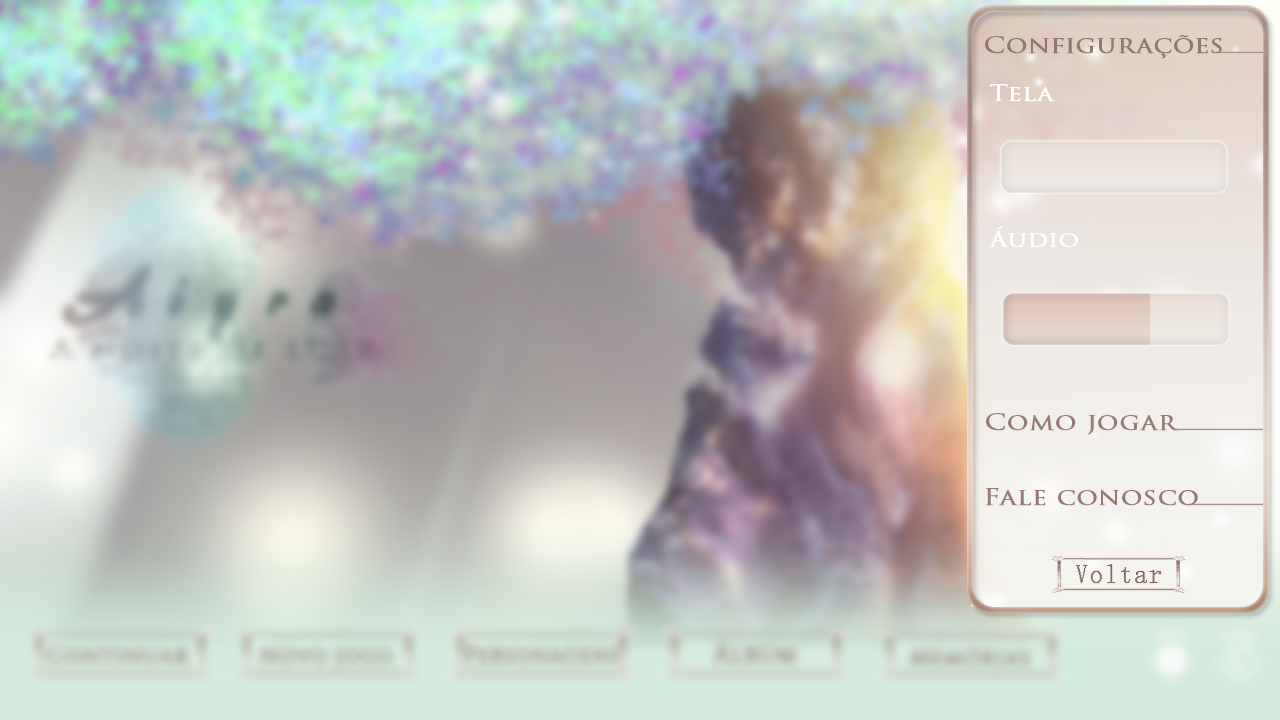
<style>
.page{position:relative;width:1280px;height:720px}
.page>*{position:absolute;margin:0}
.t1{font:22.7px "TrajanPro-Regular";color:#93766e;font-weight:bold;scale:1.18 1}
.t2{font:21.5px "TrajanPro-Regular";color:#ffffff;font-weight:bold;scale:1.18 1}
.t3{font:22.7px "TrajanPro-Regular";color:#977a72;font-weight:bold;scale:1.18 1}
</style>
<div class="page">
<p class="t1" style="left:985px;top:35px;width:237px;height:24px">Configurações</p>
<p class="t2" style="left:989px;top:83px;width:66px;height:19px">Tela</p>
<p class="t2" style="left:988px;top:226px;width:91px;height:22px">Áudio</p>
<p class="t3" style="left:986px;top:413px;width:193px;height:22px">Como jogar</p>
<p class="t3" style="left:985px;top:488px;width:213px;height:18px">Fale conosco</p>
</div>
